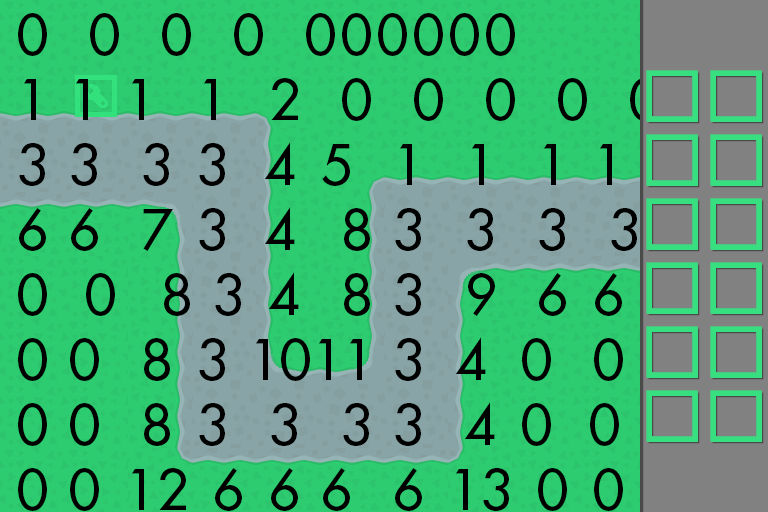
<style>
.page{position:relative;width:768px;height:512px;background:#2ecc71}
.page>*{position:absolute;margin:0}
.t1{font:54.2px "Futura";color:#000000}
</style>
<div class="page">
<p class="t1" style="left:18px;top:13px;width:641px;height:498px">0  0  0  0  0 0 0 0 0 0 <br>1  1 1  1  2  0  0  0  0  0 <br>3  3  3 3   4  5  1  1  1 1 <br>6  6  7  3   4  8  3  3  3  3 <br>0   0  8  3 4   8  3  9  6 6 <br>0  0  8  3  1011  3  4 0  0 <br>0  0  8 3  3  3  3  4 0   0 <br>0  0  12  6  6  6  6 13  0 0</p>
</div>
